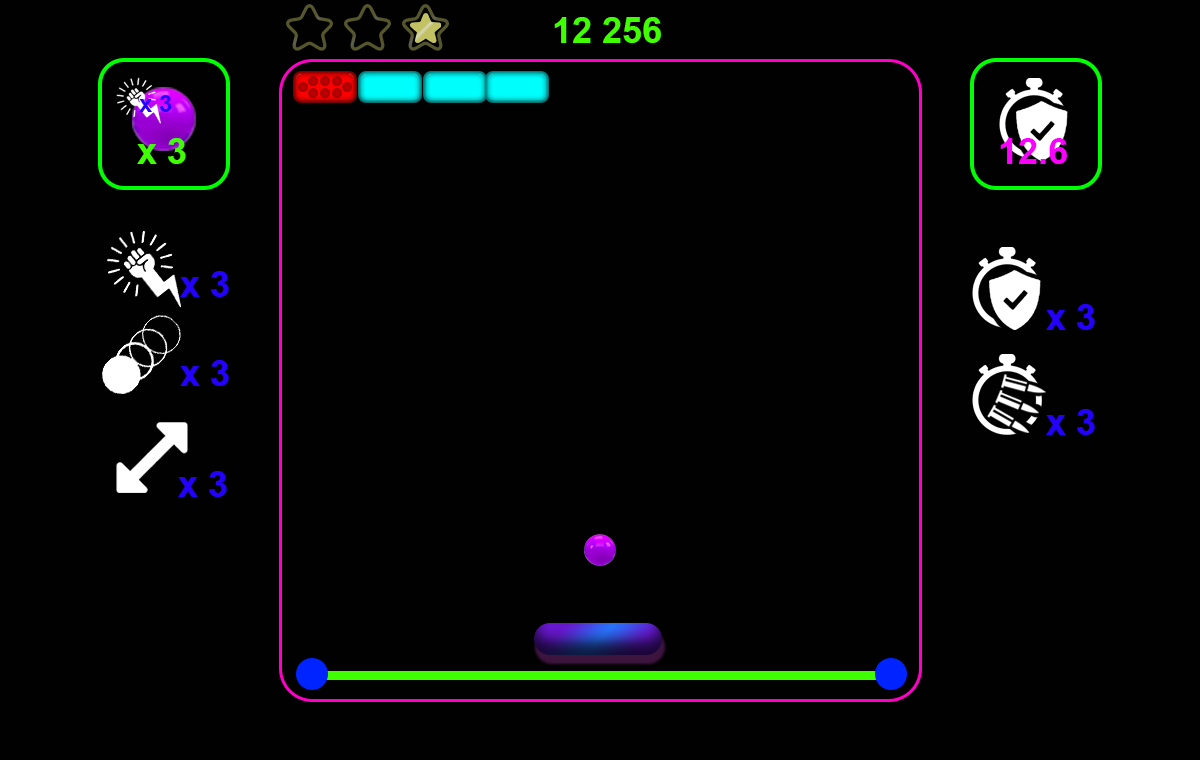
<style>
.page{position:relative;width:1200px;height:760px;background:#010101}
.page>*{position:absolute;margin:0}
.t1{font:36px "Arial-BoldMT";color:#40ff00}
.t2{font:24px "Arial-BoldMT";color:#2400ff}
.t3{font:36px "Arial-BoldMT";color:#fc00ff}
.t4{font:36px "Arial-BoldMT";color:#2400ff}
</style>
<div class="page">
<p class="t1" style="left:554px;top:17px;width:107px;height:26px">12 256</p>
<p class="t2" style="left:139px;top:95px;width:33px;height:17px">x 3</p>
<p class="t1" style="left:137px;top:138px;width:49px;height:26px">x 3</p>
<p class="t3" style="left:1000px;top:138px;width:67px;height:26px">12.6</p>
<p class="t4" style="left:180px;top:271px;width:49px;height:26px">x 3</p>
<p class="t4" style="left:1046px;top:304px;width:49px;height:26px">x 3</p>
<p class="t4" style="left:180px;top:360px;width:49px;height:26px">x 3</p>
<p class="t4" style="left:1046px;top:409px;width:49px;height:26px">x 3</p>
<p class="t4" style="left:178px;top:471px;width:49px;height:26px">x 3</p>
</div>
